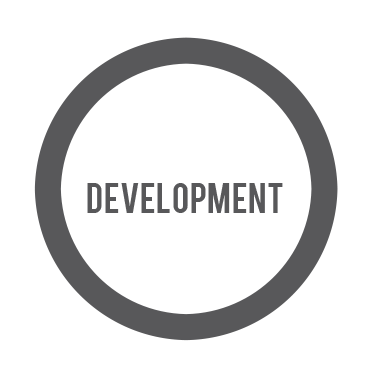
<style>
.page{position:relative;width:369px;height:388px;background:#ffffff}
.page>*{position:absolute;margin:0}
.t1{font:33.3px "Bebas";color:#58585a}
.t2{font:33.3px "Homestead-Display";color:#ffffff}
</style>
<div class="page">
<p class="t1" style="left:87px;top:149px;width:196px;height:64px;text-align:center"><span class="t2">Back-end<br></span>Development</p>
</div>
